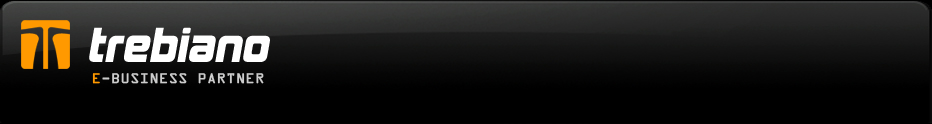
<style>
.page{position:relative;width:932px;height:124px;background:#000000}
.page>*{position:absolute;margin:0}
.t1{font:45px "Kimberley";letter-spacing:0.01em;color:#ffffff;font-style:italic}
.t2{font:15px "OCRAExtended";letter-spacing:0.01em;color:#cccccc;font-weight:bold}
.t3{font:15px "OCRAExtended";letter-spacing:0.01em;color:#ff9900;font-weight:bold}
</style>
<div class="page">
<p class="t1" style="left:89px;top:27px;width:181px;height:35px">trebiano</p>
<p class="t2" style="left:92px;top:73px;width:172px;height:11px"><span class="t3">E</span>-BUSINESS PARTNER</p>
</div>
